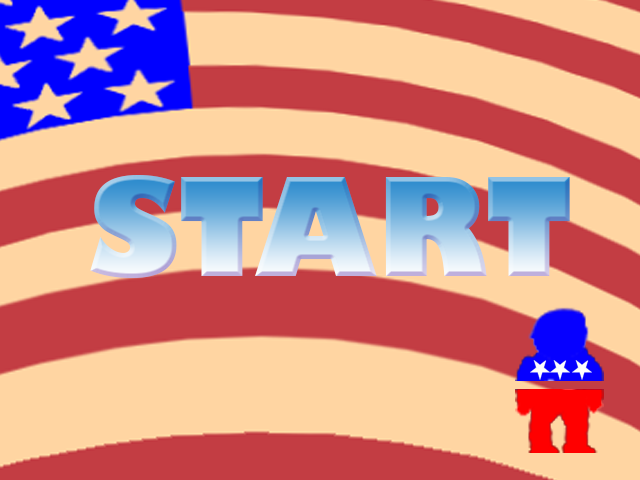
<style>
.page{position:relative;width:640px;height:480px;background:#ffd5a2}
.page>*{position:absolute;margin:0}
.t1{font:133.5px "GillSans-UltraBold";scale:0.92 1}
</style>
<div class="page">
<p class="t1" style="left:90px;top:175px;width:480px;height:103px">START</p>
</div>
